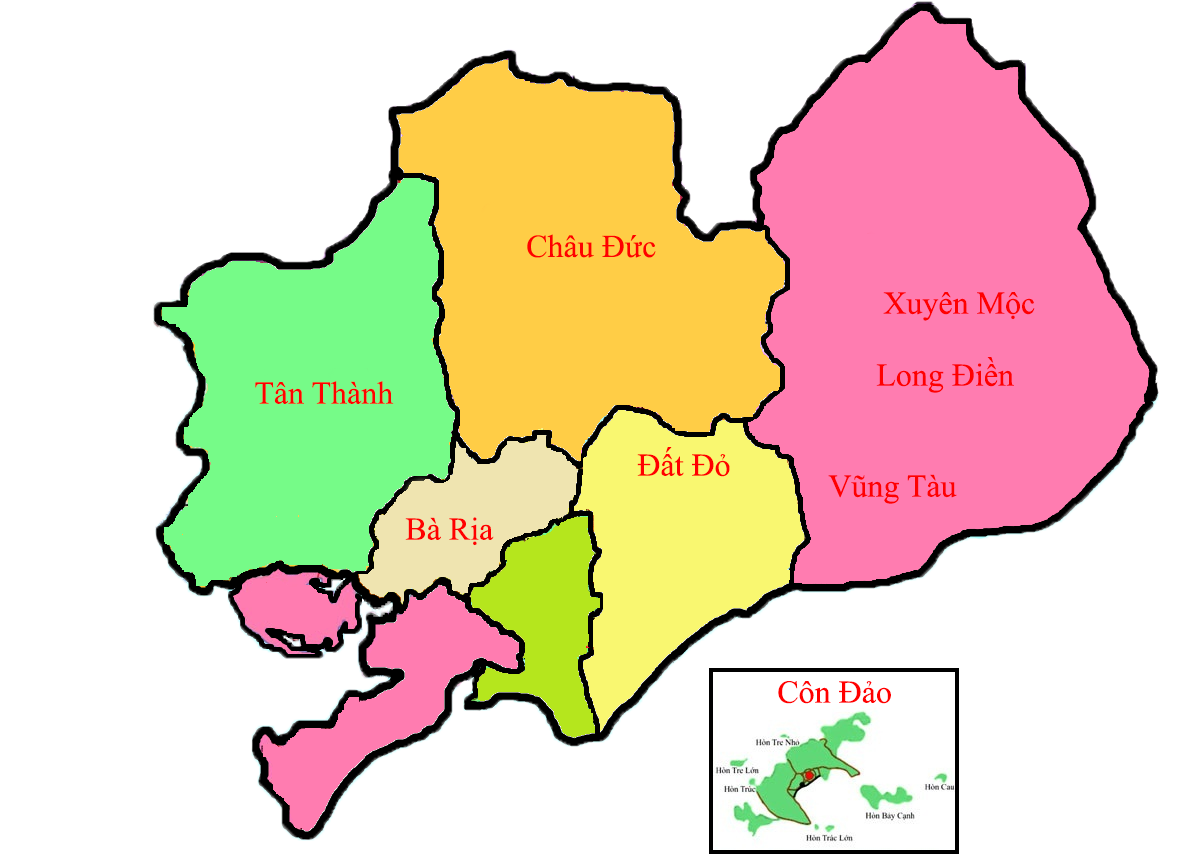
<style>
.page{position:relative;width:1200px;height:862px;background:#ffffff}
.page>*{position:absolute;margin:0}
.t1{font:32px "TimesNewRomanPSMT";color:#ff0000}
</style>
<div class="page">
<p class="t1" style="left:527px;top:234px;width:129px;height:24px">Châu Đức</p>
<p class="t1" style="left:883px;top:292px;width:152px;height:29px">Xuyên Mộc</p>
<p class="t1" style="left:876px;top:357px;width:138px;height:36px">Long Điền</p>
<p class="t1" style="left:255px;top:381px;width:139px;height:23px">Tân Thành</p>
<p class="t1" style="left:637px;top:447px;width:93px;height:30px">Đất Đỏ</p>
<p class="t1" style="left:828px;top:474px;width:129px;height:30px">Vũng Tàu</p>
<p class="t1" style="left:405px;top:517px;width:89px;height:29px">Bà Rịa</p>
<p class="t1" style="left:778px;top:681px;width:113px;height:23px">Côn Đảo</p>
</div>
